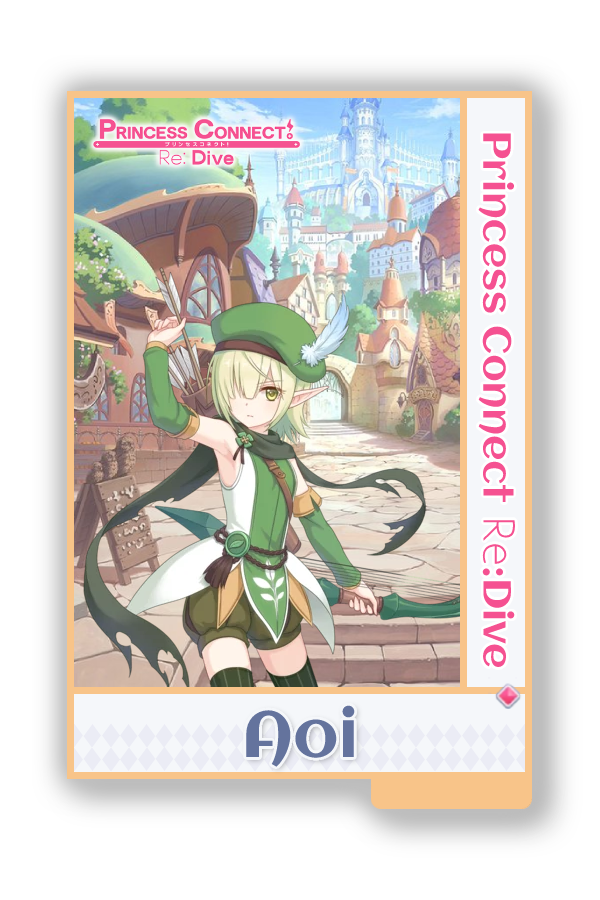
<style>
.page{position:relative;width:600px;height:900px;background:#ffffff}
.page>*{position:absolute;margin:0}
.t1{font:39px "Aclonica-Regular";color:#f55191}
.t2{font:39px "AaarghNormal";color:#f55191}
.t3{font:65px "Aclonica-Regular";color:#64739d}
</style>
<div class="page">
<p class="t1" style="left:478px;top:133px;width:38px;height:534px;rotate:90deg">Princess Connect <span class="t2">Re</span>:Dive</p>
<p class="t3" style="left:246px;top:705px;width:109px;height:62px">Aoi</p>
</div>
